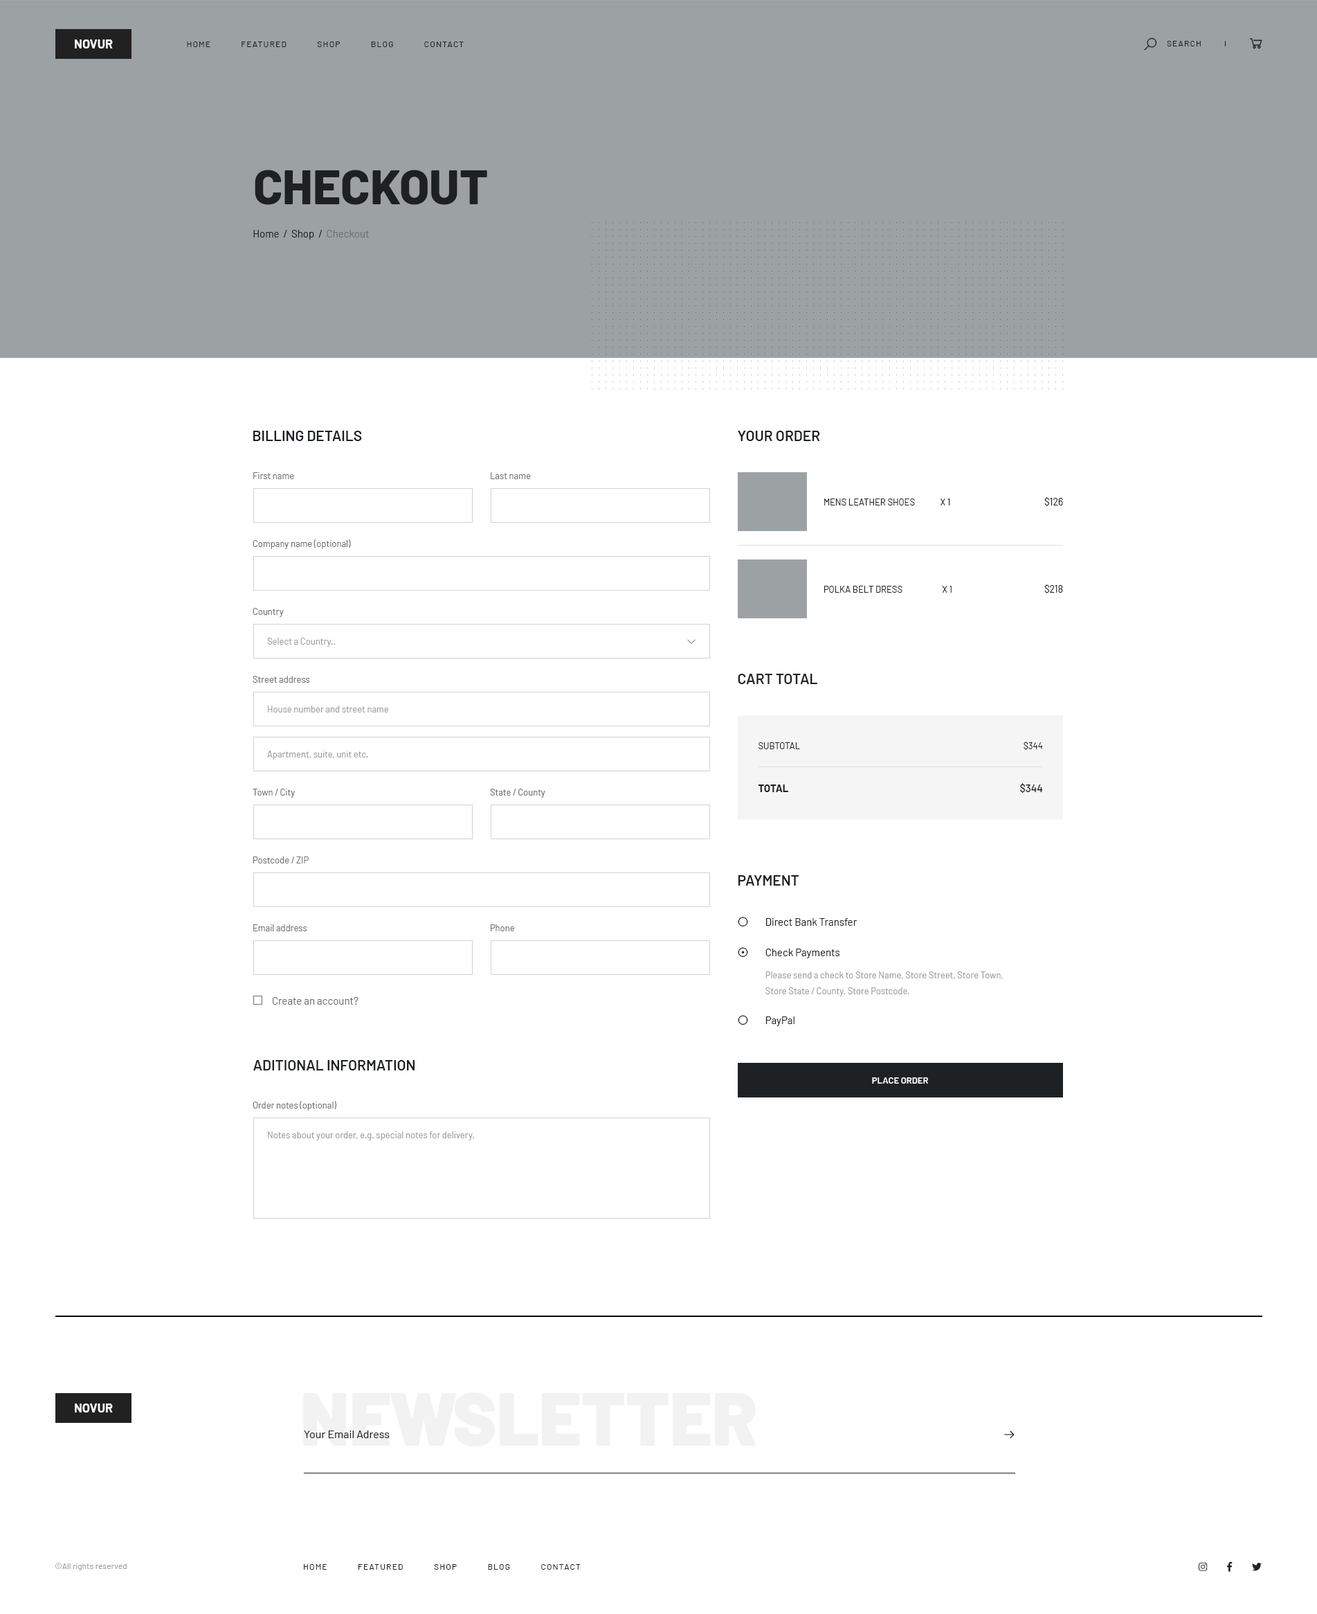
<style>
.page{position:relative;width:1317px;height:1614px;background:#ffffff}
.page>*{position:absolute;margin:0}
.t1{font:12.5px "Barlow-Bold";color:#fefefe;text-transform:uppercase}
.t2{font:8.3px "Barlow-Regular";letter-spacing:0.1em;color:#1e2124;text-transform:uppercase}
.t3{font:48.5px "Barlow-ExtraBold";color:#1e2124;text-transform:uppercase}
.t4{font:10.4px "Barlow-Regular";color:#1e2124}
.t5{font:10.4px "Barlow-Regular";color:#6e7071}
.t6{font:14.5px "Barlow-SemiBold";color:#1e2124;text-transform:uppercase}
.t7{font:9px "Barlow-Regular";color:#6e7071}
.t8{font:9.7px "Barlow-Regular";color:#1e2124}
.t9{font:9px "Barlow-Regular";color:#1e2124;text-transform:uppercase}
.t10{font:9px "Barlow-Regular";color:#9e9d9d}
.t11{font:9px "Barlow-Regular";color:#1e2124}
.t12{font:10.4px "Barlow-Bold";color:#1e2124;text-transform:uppercase}
.t13{font:10.4px "Barlow-Medium";color:#1e2124}
.t14{font:9px/15.9px "Barlow-Regular";color:#9e9d9d}
.t15{font:9px "Barlow-SemiBold";color:#ffffff;text-transform:uppercase}
.t16{font:74.1px "Barlow-Black";color:#f2f2f2}
.t17{font:11.1px "Barlow-Regular";color:#1e2124}
.t18{font:8.3px "Barlow-Regular";color:#9e9d9d}
</style>
<div class="page">
<p class="t1" style="left:75px;top:39px;width:38px;height:9px">novur</p>
<p class="t2" style="left:187px;top:42px;width:277px;height:5px">Home            Featured            Shop            Blog            Contact</p>
<p class="t2" style="left:1167px;top:41px;width:34px;height:5px">Search</p>
<p class="t3" style="left:255px;top:170px;width:232px;height:35px">Checkout</p>
<p class="t4" style="left:253px;top:230px;width:116px;height:10px">Home  /  Shop  /<span class="t5">  Checkout</span></p>
<p class="t6" style="left:253px;top:431px;width:109px;height:10px">Billing Details</p>
<p class="t6" style="left:738px;top:431px;width:82px;height:10px">Your order</p>
<p class="t7" style="left:253px;top:472px;width:41px;height:7px">First name</p>
<p class="t7" style="left:491px;top:472px;width:40px;height:7px">Last name</p>
<p class="t8" style="left:1045px;top:497px;width:18px;height:9px">$126</p>
<p class="t9" style="left:825px;top:498px;width:126px;height:7px">Mens Leather Shoes              X 1</p>
<p class="t7" style="left:253px;top:539px;width:98px;height:10px">Company name (optional)</p>
<p class="t9" style="left:825px;top:586px;width:127px;height:7px">Polka Belt Dress                      X 1</p>
<p class="t8" style="left:1045px;top:584px;width:18px;height:9px">$218</p>
<p class="t7" style="left:253px;top:608px;width:31px;height:9px">Country</p>
<p class="t10" style="left:267px;top:638px;width:69px;height:9px">Select a Country..</p>
<p class="t7" style="left:253px;top:676px;width:57px;height:7px">Street address</p>
<p class="t6" style="left:738px;top:674px;width:80px;height:10px">Cart total</p>
<p class="t10" style="left:268px;top:705px;width:120px;height:7px">House number and street name</p>
<p class="t9" style="left:759px;top:742px;width:41px;height:7px">Subtotal</p>
<p class="t11" style="left:1024px;top:741px;width:19px;height:9px">$344</p>
<p class="t10" style="left:267px;top:750px;width:101px;height:9px">Apartment, suite, unit etc.</p>
<p class="t12" style="left:758px;top:784px;width:31px;height:8px">Total</p>
<p class="t13" style="left:1020px;top:783px;width:23px;height:10px">$344</p>
<p class="t7" style="left:253px;top:789px;width:42px;height:9px">Town / City</p>
<p class="t7" style="left:490px;top:789px;width:56px;height:9px">State / County</p>
<p class="t7" style="left:253px;top:856px;width:56px;height:7px">Postcode / ZIP</p>
<p class="t6" style="left:738px;top:875px;width:61px;height:10px">Payment</p>
<p class="t4" style="left:766px;top:918px;width:92px;height:8px">Direct Bank Transfer</p>
<p class="t7" style="left:253px;top:924px;width:54px;height:7px">Email address</p>
<p class="t7" style="left:491px;top:924px;width:23px;height:7px">Phone</p>
<p class="t4" style="left:766px;top:948px;width:74px;height:10px">Check Payments</p>
<p class="t14" style="left:766px;top:971px;width:237px;height:25px">Please send a check to Store Name, Store Street, Store Town, <br>Store State / County, Store Postcode.</p>
<p class="t5" style="left:273px;top:997px;width:86px;height:8px">Create an account?</p>
<p class="t4" style="left:766px;top:1016px;width:29px;height:10px">PayPal</p>
<p class="t6" style="left:253px;top:1060px;width:162px;height:10px">Aditional Information</p>
<p class="t15" style="left:872px;top:1077px;width:56px;height:6px">Place order</p>
<p class="t7" style="left:253px;top:1101px;width:84px;height:9px">Order notes (optional)</p>
<p class="t10" style="left:268px;top:1131px;width:206px;height:9px">Notes about your order, e.g. special notes for delivery.</p>
<p class="t16" style="left:303px;top:1392px;width:453px;height:54px">NEWSLETTER</p>
<p class="t1" style="left:75px;top:1403px;width:38px;height:9px">Novur</p>
<p class="t17" style="left:304px;top:1430px;width:86px;height:8px">Your Email Adress</p>
<p class="t18" style="left:55px;top:1563px;width:72px;height:7px">©All rights reserved</p>
<p class="t2" style="left:304px;top:1564px;width:277px;height:5px">Home            Featured            Shop            Blog            Contact</p>
</div>
